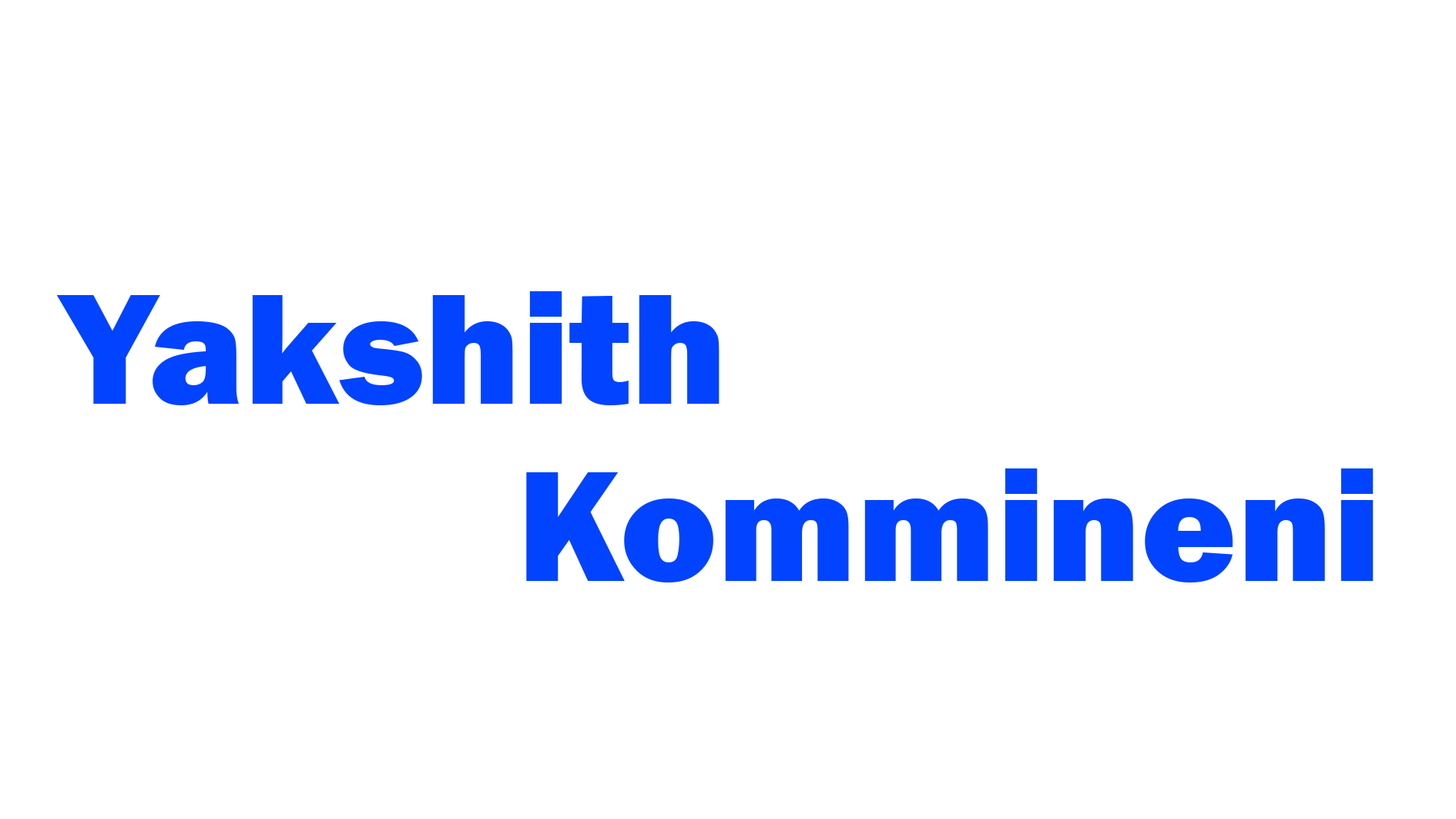
<style>
.page{position:relative;width:1456px;height:819px;background:#ffffff}
.page>*{position:absolute;margin:0}
.t1{font:163.4px "FranklinGothic-Heavy";color:#0143ff}
</style>
<div class="page">
<p class="t1" style="left:56px;top:291px;width:664px;height:114px">Yakshith</p>
<p class="t1" style="left:526px;top:468px;width:848px;height:114px">Kommineni</p>
</div>
